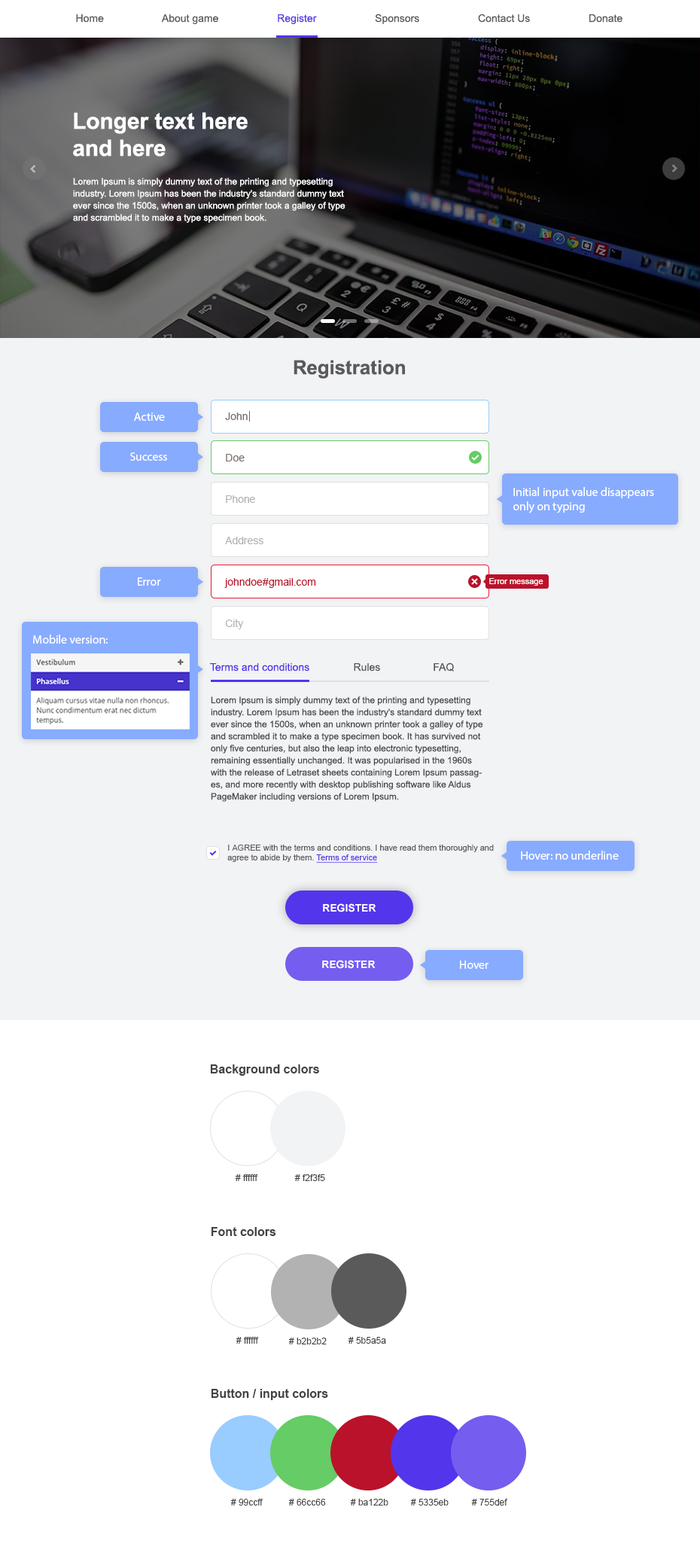
<style>
.page{position:relative;width:700px;height:1568px;background:#ffffff}
.page>*{position:absolute;margin:0}
.t1{font:10.5px "ArialMT";color:#5b5a5a}
.t2{font:10.5px "ArialMT";color:#5335eb}
.t3{font:22.6px "Arial-BoldMT";color:#ffffff}
.t4{font:9px/12px "ArialMT";color:#ffffff}
.t5{font:19.6px "Arial-BoldMT";color:#5b5a5a}
.t6{font:12px "MyriadPro-Regular";color:#ffffff}
.t7{font:10.5px "ArialMT";color:#796b67}
.t8{font:10.5px "ArialMT";color:#b3b3b3}
.t9{font:10.5px "ArialMT";color:#ba122b}
.t10{font:8.3px "ArialMT";color:#ffffff}
.t11{font:9px/12px "ArialMT";color:#4b4b4b}
.t12{font:8.3px "ArialMT";color:#5b5a5a}
.t13{font:8.3px "ArialMT";color:#5335eb;text-decoration:underline}
.t14{font:10.5px "Arial-BoldMT";color:#ffffff;text-transform:uppercase}
.t15{font:12px "Arial-BoldMT";color:#434343}
.t16{font:9px "ArialMT";color:#434343}
</style>
<div class="page">
<p class="t1" style="left:76px;top:14px;width:547px;height:11px">Home                    About game                    <span class="t2">Register </span>                   Sponsors                    Contact Us                    Donate</p>
<p class="t3" style="left:73px;top:112px;width:175px;height:45px">Longer text here<br>and here</p>
<p class="t4" style="left:73px;top:178px;width:273px;height:45px">Lorem Ipsum is simply dummy text of the printing and typesetting industry. Lorem Ipsum has been the industry's standard dummy text ever since the 1500s, when an unknown printer took a galley of type and scrambled it to make a type specimen book.</p>
<p class="t5" style="left:294px;top:360px;width:111px;height:19px">Registration</p>
<p class="t6" style="left:134px;top:413px;width:31px;height:8px">Active</p>
<p class="t7" style="left:225px;top:413px;width:23px;height:7px">John</p>
<p class="t6" style="left:130px;top:452px;width:37px;height:9px">Success</p>
<p class="t7" style="left:226px;top:454px;width:19px;height:7px">Doe</p>
<p class="t8" style="left:226px;top:495px;width:29px;height:8px">Phone</p>
<p class="t6" style="left:513px;top:487px;width:141px;height:26px">Initial input value disappears only on typing</p>
<p class="t8" style="left:225px;top:537px;width:38px;height:7px">Address</p>
<p class="t6" style="left:138px;top:577px;width:23px;height:9px">Error</p>
<p class="t9" style="left:224px;top:578px;width:92px;height:10px">johndoe#gmail.com</p>
<p class="t10" style="left:489px;top:578px;width:54px;height:8px">Error message</p>
<p class="t8" style="left:225px;top:619px;width:19px;height:10px">City</p>
<p class="t6" style="left:33px;top:635px;width:75px;height:9px">Mobile version:</p>
<p class="t1" style="left:210px;top:662px;width:244px;height:9px"><span class="t2">Terms and conditions</span>               Rules                  FAQ</p>
<p class="t11" style="left:211px;top:696px;width:272px;height:106px">Lorem Ipsum is simply dummy text of the printing and typesetting industry. Lorem Ipsum has been the industry's standard dummy text ever since the 1500s, when an unknown printer took a galley of type and scrambled it to make a type specimen book. It has survived not only five centuries, but also the leap into electronic typesetting, remaining essentially unchanged. It was popularised in the 1960s with the release of Letraset sheets containing Lorem Ipsum passages, and more recently with desktop publishing software like Aldus PageMaker including versions of Lorem Ipsum.</p>
<p class="t12" style="left:227px;top:845px;width:267px;height:18px">I AGREE with the terms and conditions. I have read them thoroughly and <br>agree to abide by them. <span class="t13">Terms of service</span></p>
<p class="t6" style="left:521px;top:851px;width:98px;height:9px">Hover: no underline</p>
<p class="t14" style="left:323px;top:903px;width:53px;height:9px">Register</p>
<p class="t14" style="left:322px;top:960px;width:54px;height:9px">Register</p>
<p class="t6" style="left:460px;top:961px;width:29px;height:8px">Hover</p>
<p class="t15" style="left:210px;top:1064px;width:109px;height:12px">Background colors</p>
<p class="t16" style="left:235px;top:1174px;width:23px;height:7px"># ffffff</p>
<p class="t16" style="left:294px;top:1174px;width:31px;height:7px"># f2f3f5</p>
<p class="t15" style="left:211px;top:1227px;width:65px;height:9px">Font colors</p>
<p class="t16" style="left:236px;top:1337px;width:23px;height:7px"># ffffff</p>
<p class="t16" style="left:288px;top:1338px;width:39px;height:6px"># b2b2b2</p>
<p class="t16" style="left:348px;top:1337px;width:38px;height:7px"># 5b5a5a</p>
<p class="t15" style="left:211px;top:1389px;width:117px;height:11px">Button / input colors</p>
<p class="t16" style="left:230px;top:1499px;width:33px;height:7px"># 99ccff</p>
<p class="t16" style="left:288px;top:1499px;width:38px;height:7px"># 66cc66</p>
<p class="t16" style="left:350px;top:1499px;width:38px;height:7px"># ba122b</p>
<p class="t16" style="left:410px;top:1499px;width:39px;height:7px"># 5335eb</p>
<p class="t16" style="left:471px;top:1499px;width:37px;height:7px"># 755def</p>
</div>
